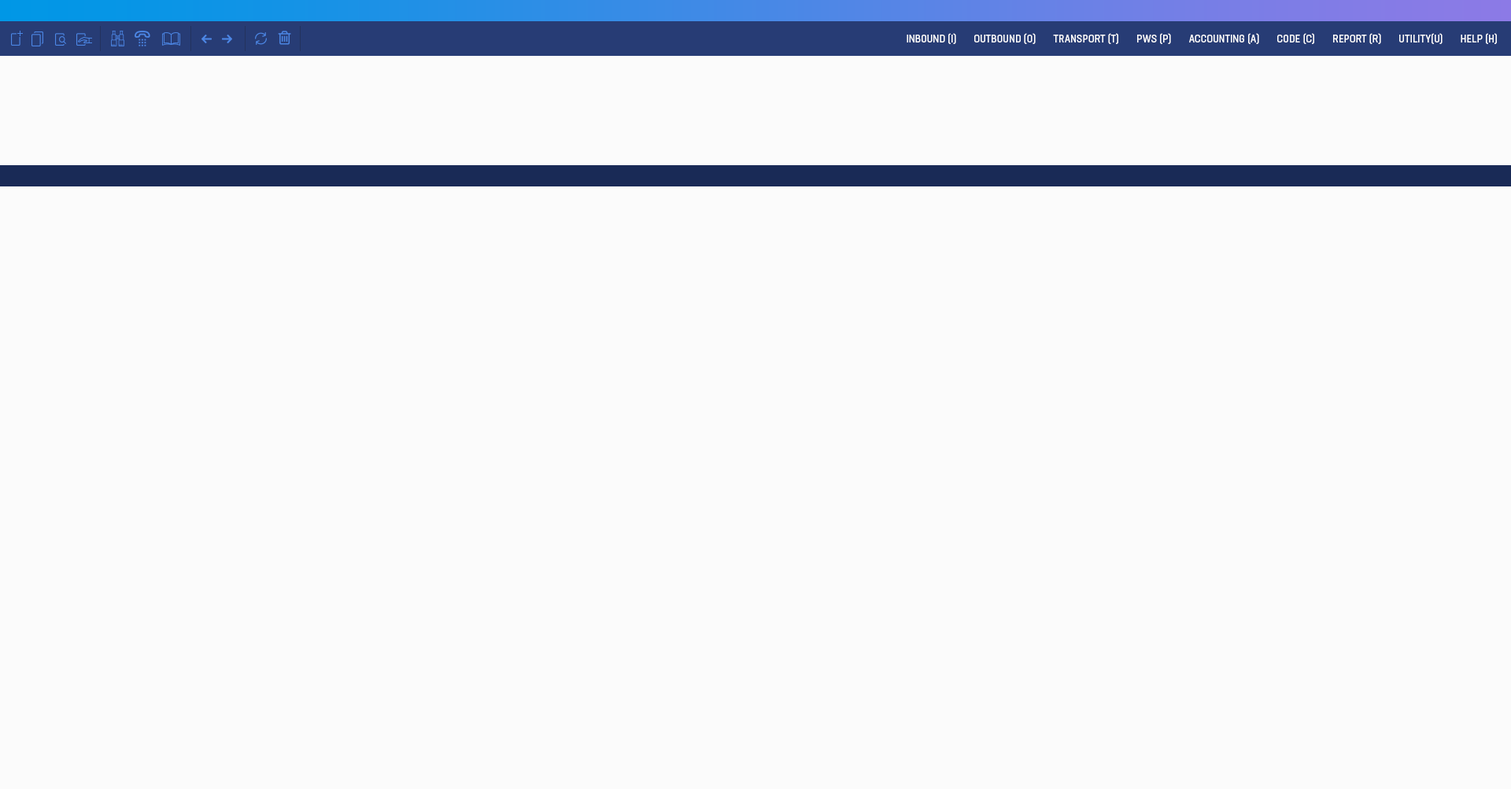
<style>
.page{position:relative;width:1511px;height:789px;background:#fbfbfb}
.page>*{position:absolute;margin:0}
.t1{font:11px "NeusaNextStd-CondensedRegular";letter-spacing:0.02em;color:#ffffff;text-transform:uppercase}
</style>
<div class="page">
<p class="t1" style="left:907px;top:33px;width:590px;height:11px">Inbound (I)       Outbound (O)       Transport (T)       PWS (P)       Accounting (A)       Code (C)       Report (R)       Utility(U)       Help (H)</p>
</div>
